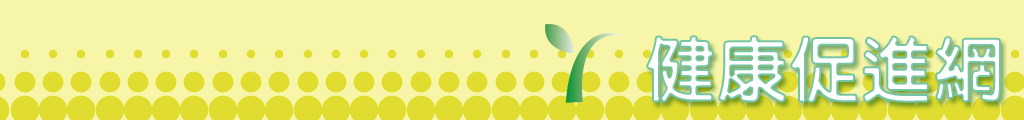
<style>
.page{position:relative;width:1024px;height:120px;background:#f7f6a8}
.page>*{position:absolute;margin:0}
.t1{font:72px "DFLiYuanStd-W8"}
</style>
<div class="page">
<p class="t1" style="left:646px;top:35px;width:355px;height:68px">健康促進網</p>
</div>
